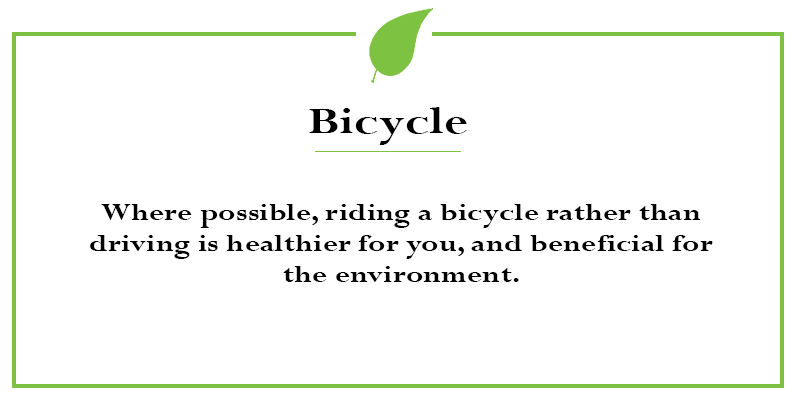
<style>
.page{position:relative;width:800px;height:400px;background:#ffffff}
.page>*{position:absolute;margin:0}
.t1{font:40.8px "Perpetua-Bold";color:#000000;scale:1.26 1}
.t2{font:25.6px "Perpetua-Bold";color:#000000;scale:1.26 1}
</style>
<div class="page">
<p class="t1" style="left:309px;top:107px;width:158px;height:38px">Bicycle</p>
<p class="t2" style="left:90px;top:204px;width:623px;height:78px;text-align:center">Where possible, riding a bicycle rather than driving is healthier for you, and beneficial for the environment.</p>
</div>
